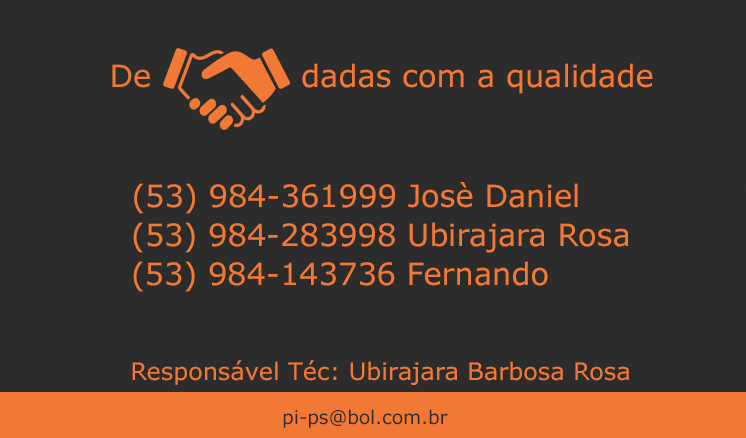
<style>
.page{position:relative;width:746px;height:438px;background:#2c2c2c}
.page>*{position:absolute;margin:0}
.t1{font:30.5px "Verdana";color:#f27935}
.t2{font:24px "Verdana";color:#f27935}
.t3{font:18.7px "Verdana";color:#2c2c2c}
</style>
<div class="page">
<p class="t1" style="left:112px;top:63px;width:541px;height:31px">De              dadas com a qualidade</p>
<p class="t1" style="left:134px;top:182px;width:444px;height:32px">(53) 984-361999 Josè Daniel</p>
<p class="t1" style="left:133px;top:222px;width:495px;height:31px">(53) 984-283998 Ubirajara Rosa</p>
<p class="t1" style="left:133px;top:261px;width:415px;height:31px">(53) 984-143736 Fernando</p>
<p class="t2" style="left:132px;top:360px;width:497px;height:25px">Responsável Téc: Ubirajara Barbosa Rosa</p>
<p class="t3" style="left:283px;top:409px;width:165px;height:19px">pi-ps@bol.com.br</p>
</div>
